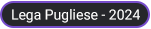
<style>
.page{position:relative;width:151px;height:29px;background:#26272b}
.page>*{position:absolute;margin:0}
.t1{font:14px "Roboto-Regular";color:#ffffff}
</style>
<div class="page">
<p class="t1" style="left:12px;top:9px;width:128px;height:14px">Lega Pugliese - 2024</p>
</div>
